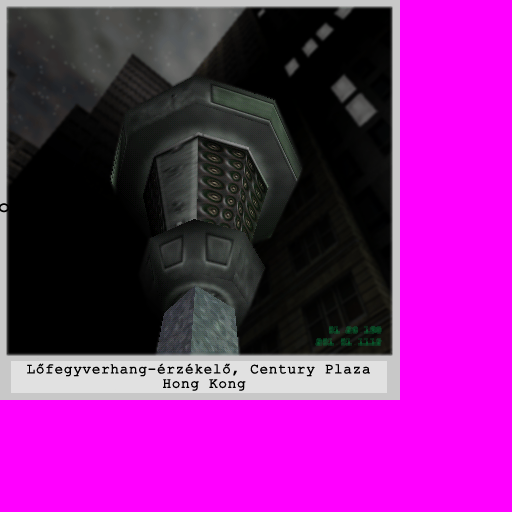
<style>
.page{position:relative;width:512px;height:512px;background:#ff00ff}
.page>*{position:absolute;margin:0}
.t1{font:14.4px/14.4px "CourierNewPSMT";letter-spacing:0.02em;color:#000000;font-weight:bold}
</style>
<div class="page">
<p class="t1" style="left:27px;top:363px;width:343px;height:28px">Lőfegyverhang-érzékelő, Century Plaza<br>      Hong Kong</p>
</div>
